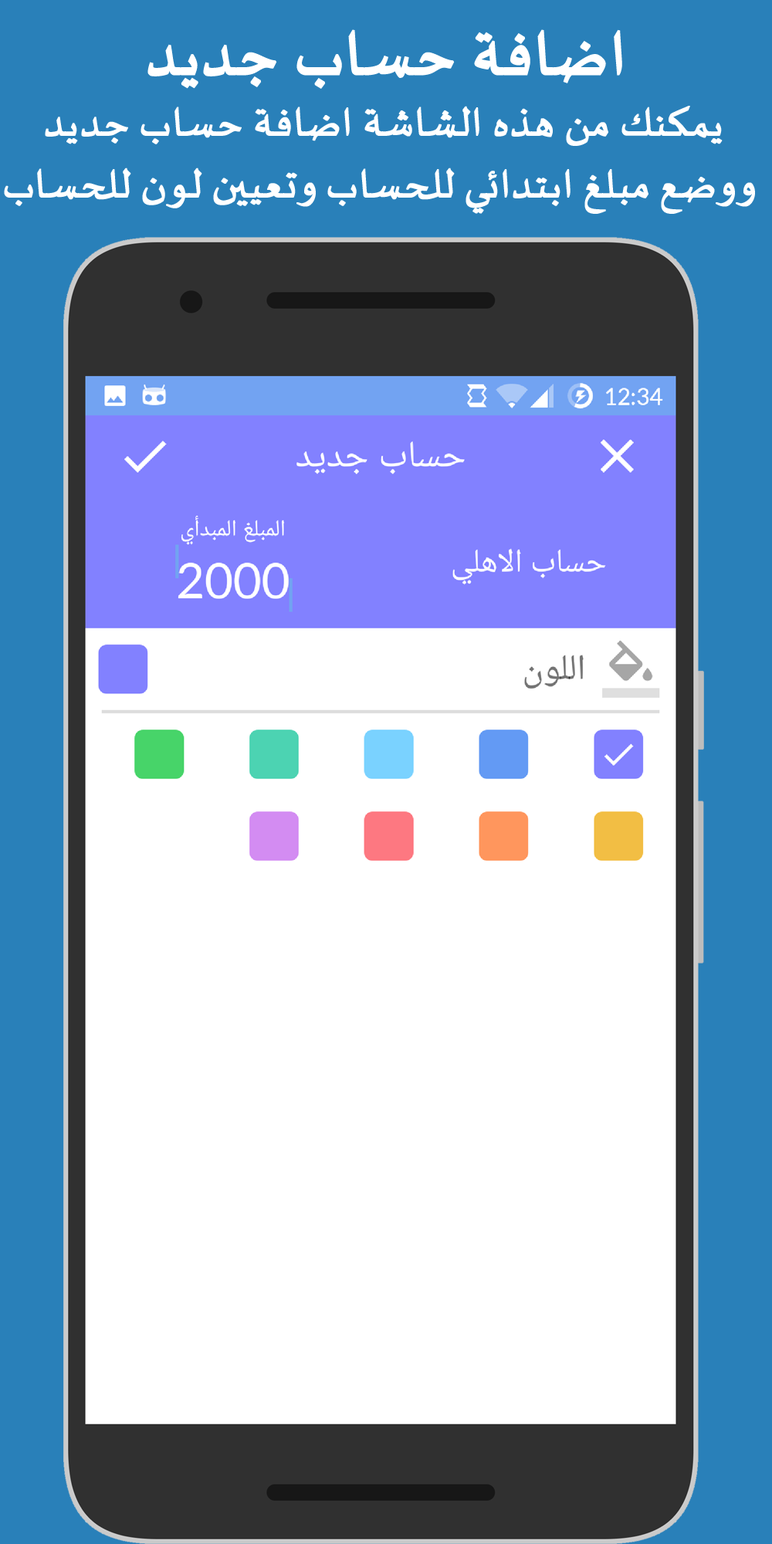
<style>
.page{position:relative;width:772px;height:1544px;background:#ffffff}
.page>*{position:absolute;margin:0}
.t1{font:80.3px "SakkalMajalla";color:#ffffff;font-weight:bold}
.t2{font:51.5px "SakkalMajalla";color:#ffffff;font-weight:bold}
</style>
<div class="page">
<p class="t1" style="left:147px;top:29px;width:475px;height:60px">اضافة حساب جديد</p>
<p class="t2" style="left:4px;top:106px;width:751px;height:108px;text-align:center">يمكنك من هذه الشاشة اضافة حساب جديد<br> ووضع مبلغ ابتدائي للحساب وتعيين لون للحساب</p>
</div>
